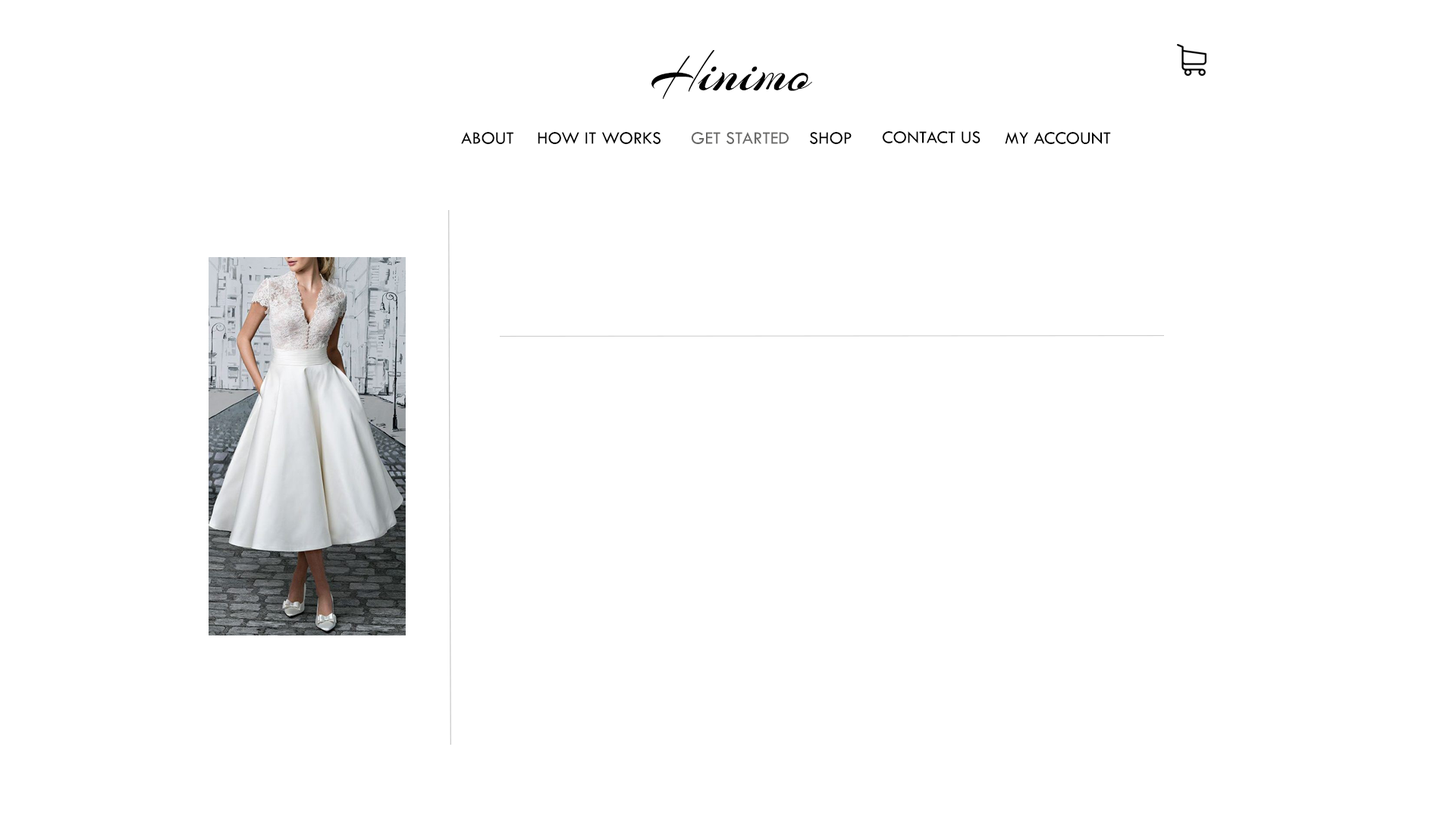
<style>
.page{position:relative;width:1456px;height:819px;background:#ffffff}
.page>*{position:absolute;margin:0}
.t1{font:60.6px "Arizonia-Regular";color:#000000}
.t2{font:18.2px "TwCenMT-Regular";color:#000000}
.t3{font:18.2px "TwCenMT-Regular";color:#686867}
.t4{font:18.1px "TwCenMT-Regular";color:#000000}
</style>
<div class="page">
<p class="t1" style="left:651px;top:50px;width:161px;height:49px">Hinimo</p>
<p class="t2" style="left:461px;top:132px;width:52px;height:12px">ABOUT</p>
<p class="t2" style="left:538px;top:132px;width:122px;height:12px">HOW IT WORKS</p>
<p class="t3" style="left:692px;top:132px;width:97px;height:12px">GET STARTED</p>
<p class="t4" style="left:810px;top:132px;width:42px;height:12px">SHOP</p>
<p class="t4" style="left:882px;top:131px;width:99px;height:12px">CONTACT US</p>
<p class="t4" style="left:1005px;top:132px;width:106px;height:12px">MY ACCOUNT</p>
</div>
